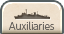
<style>
.page{position:relative;width:64px;height:34px}
.page>*{position:absolute;margin:0}
.t1{font:10px "UDShinGoPro-Light";color:#6a6560;scale:0.9 1}
</style>
<div class="page">
<p class="t1" style="left:9px;top:21px;width:46px;height:9px">Auxiliaries</p>
</div>
